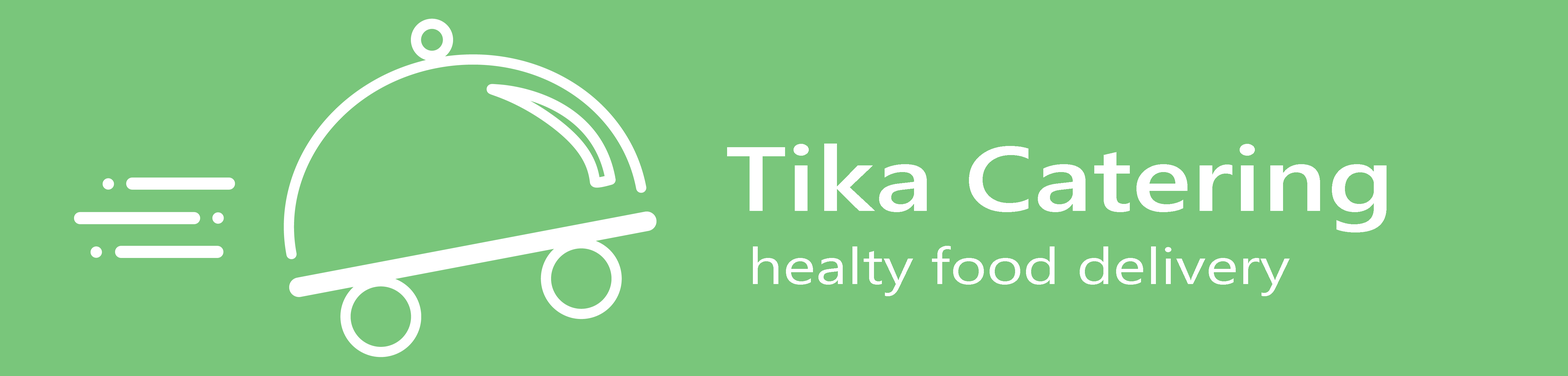
<style>
.page{position:relative;width:1568px;height:376px;background:#79c67b}
.page>*{position:absolute;margin:0}
.t1{font:91px "SegoeUI-Semibold";color:#ffffff;scale:1.23 1}
.t2{font:50.6px "SegoeUI";color:#ffffff;scale:1.23 1}
</style>
<div class="page">
<p class="t1" style="left:727px;top:144px;width:660px;height:88px">Tika Catering</p>
<p class="t2" style="left:753px;top:246px;width:537px;height:50px">healty food delivery</p>
</div>
